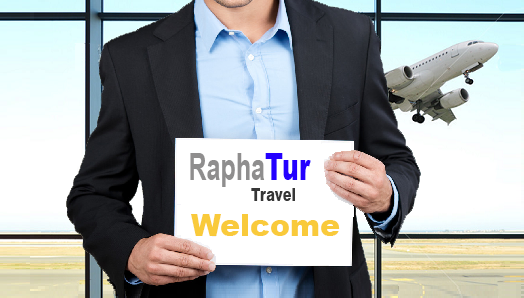
<style>
.page{position:relative;width:524px;height:298px}
.page>*{position:absolute;margin:0}
.t1{font:37.2px "Arial-BoldMT";color:#8f8e8e;scale:0.68 1}
.t2{font:37.2px "Arial-Black";color:#2400ff;scale:0.68 1}
.t3{font:17.7px "Arial-Black";color:#363636;scale:0.75 1}
.t4{font:30px "Arial-Black";color:#f9ca3b}
</style>
<div class="page">
<p class="t1" style="left:190px;top:153px;width:121px;height:34px">Rapha<span class="t2">Tur</span></p>
<p class="t3" style="left:251px;top:188px;width:44px;height:13px">Travel</p>
<p class="t4" style="left:191px;top:214px;width:149px;height:22px">Welcome</p>
</div>
